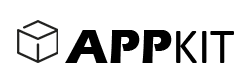
<style>
.page{position:relative;width:246px;height:83px;background:#ffffff}
.page>*{position:absolute;margin:0}
.t1{font:50px "ErasITC-Bold";color:#000000}
.t2{font:50px "Calibri";color:#000000}
</style>
<div class="page">
<p class="t1" style="left:65px;top:30px;width:169px;height:33px">APP<span class="t2">KIT</span></p>
</div>
